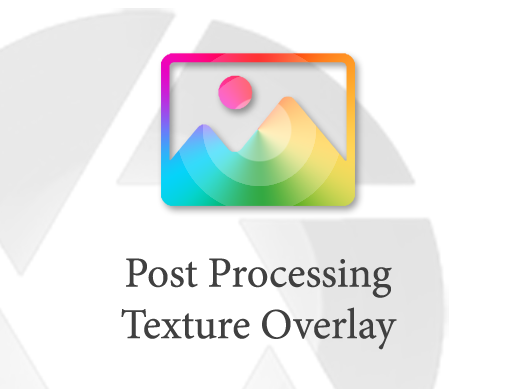
<style>
.page{position:relative;width:516px;height:389px;background:#ffffff}
.page>*{position:absolute;margin:0}
.t1{font:43px "MinionPro-Regular";color:#404040}
</style>
<div class="page">
<p class="t1" style="left:121px;top:258px;width:276px;height:92px;text-align:center">Post Processing<br>Texture Overlay</p>
</div>
